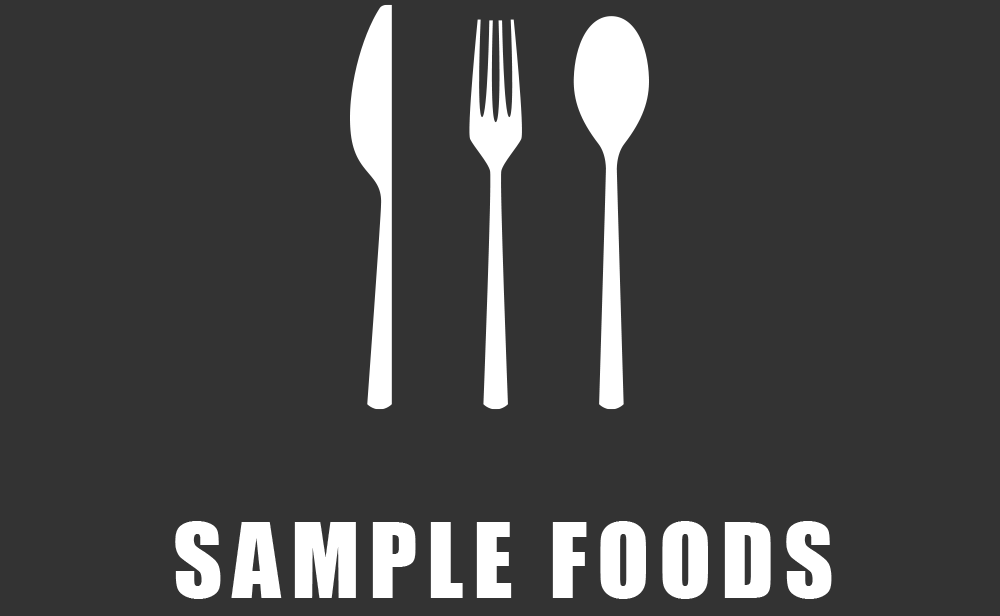
<style>
.page{position:relative;width:1000px;height:616px;background:#333333}
.page>*{position:absolute;margin:0}
.t1{font:96px "Impact";letter-spacing:0.1em;color:#ffffff}
</style>
<div class="page">
<p class="t1" style="left:175px;top:521px;width:657px;height:78px">SAMPLE FOODS</p>
</div>
